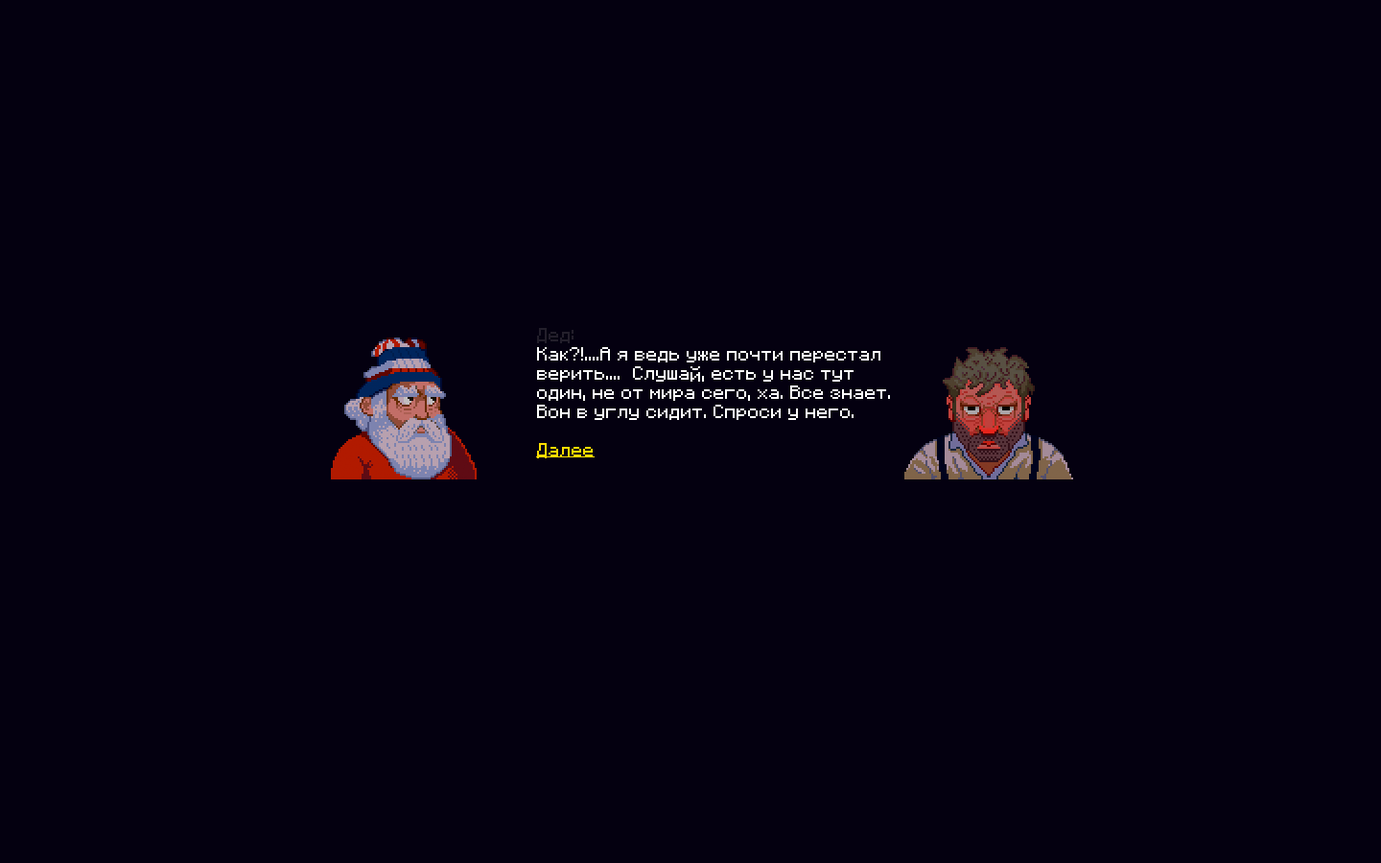
<style>
.page{position:relative;width:1381px;height:863px;background:#040010}
.page>*{position:absolute;margin:0}
.t1{font:15.3px/19.2px "F77-Minecraft";color:#ffffff}
.t2{font:15.3px/19.2px "F77-Minecraft";color:#231f2b}
.t3{font:15.3px/19.2px "F77-Minecraft";color:#fedd00;text-decoration:underline}
</style>
<div class="page">
<p class="t1" style="left:536px;top:328px;width:354px;height:131px"><span class="t2">Дед:<br></span>Как?!....А я ведь уже почти перестал <br>верить....  Слушай, есть у нас тут <br>один, не от мира сего, ха. Все знает.<br>Вон в углу сидит. Спроси у него. <br><br><span class="t3">Далее</span></p>
</div>
